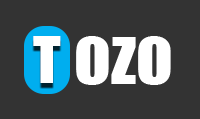
<style>
.page{position:relative;width:200px;height:119px;background:#333333}
.page>*{position:absolute;margin:0}
.t1{font:60px "Impact";color:#ffffff;text-transform:uppercase}
.t2{font:72px "Impact";color:#ffffff}
</style>
<div class="page">
<p class="t1" style="left:33px;top:36px;width:28px;height:47px">t</p>
<p class="t2" style="left:76px;top:36px;width:95px;height:49px">ozo</p>
</div>
